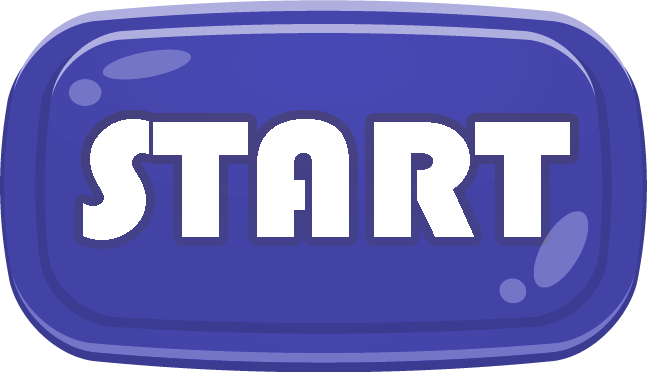
<style>
.page{position:relative;width:647px;height:372px;background:#4343a6}
.page>*{position:absolute;margin:0}
.t1{font:173.5px "Bauhaus93";color:#ffffff;scale:1.09 1}
</style>
<div class="page">
<p class="t1" style="left:83px;top:119px;width:487px;height:121px">START</p>
</div>
